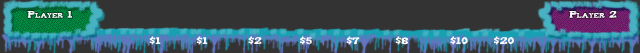
<style>
.page{position:relative;width:640px;height:53px;background:#333333}
.page>*{position:absolute;margin:0}
.t1{font:8px "Tiza";color:#ffffff;font-variant:small-caps}
</style>
<div class="page">
<p class="t1" style="left:27px;top:10px;width:45px;height:8px">Player 1</p>
<p class="t1" style="left:569px;top:10px;width:48px;height:8px">Player 2</p>
<p class="t1" style="left:149px;top:36px;width:12px;height:9px">$1</p>
<p class="t1" style="left:196px;top:36px;width:12px;height:9px">$1</p>
<p class="t1" style="left:248px;top:36px;width:14px;height:9px">$2</p>
<p class="t1" style="left:300px;top:36px;width:12px;height:9px">$5</p>
<p class="t1" style="left:346px;top:36px;width:14px;height:9px">$7</p>
<p class="t1" style="left:395px;top:36px;width:14px;height:9px">$8</p>
<p class="t1" style="left:450px;top:36px;width:18px;height:9px">$10</p>
<p class="t1" style="left:494px;top:36px;width:20px;height:9px">$20</p>
</div>
